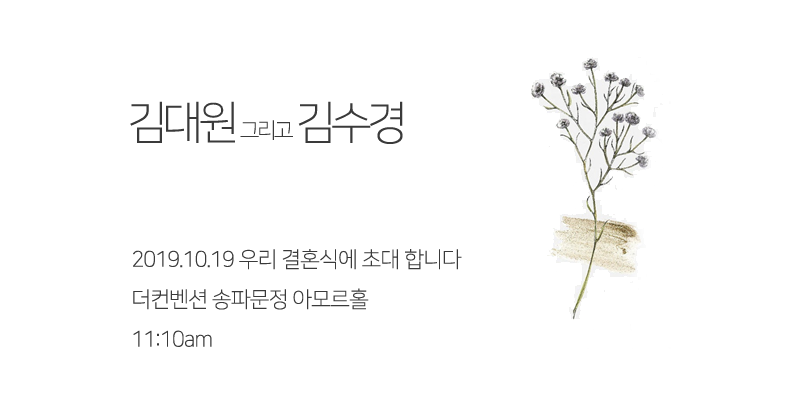
<style>
.page{position:relative;width:800px;height:400px;background:#ffffff}
.page>*{position:absolute;margin:0}
.t1{font:45.3px "NanumSquareL";letter-spacing:-0.12em;color:#3a3a3a}
.t2{font:21.6px "NanumSquareL";letter-spacing:-0.12em;color:#3a3a3a}
.t3{font:21.8px/40px "NanumSquareL";letter-spacing:-0.04em;color:#3a3a3a}
</style>
<div class="page">
<p class="t1" style="left:130px;top:101px;width:273px;height:43px">김대원 <span class="t2">그리고 </span>김수경</p>
<p class="t3" style="left:133px;top:249px;width:329px;height:98px">2019.10.19 우리 결혼식에 초대 합니다<br>더컨벤션 송파문정 아모르홀<br>11:10am</p>
</div>
